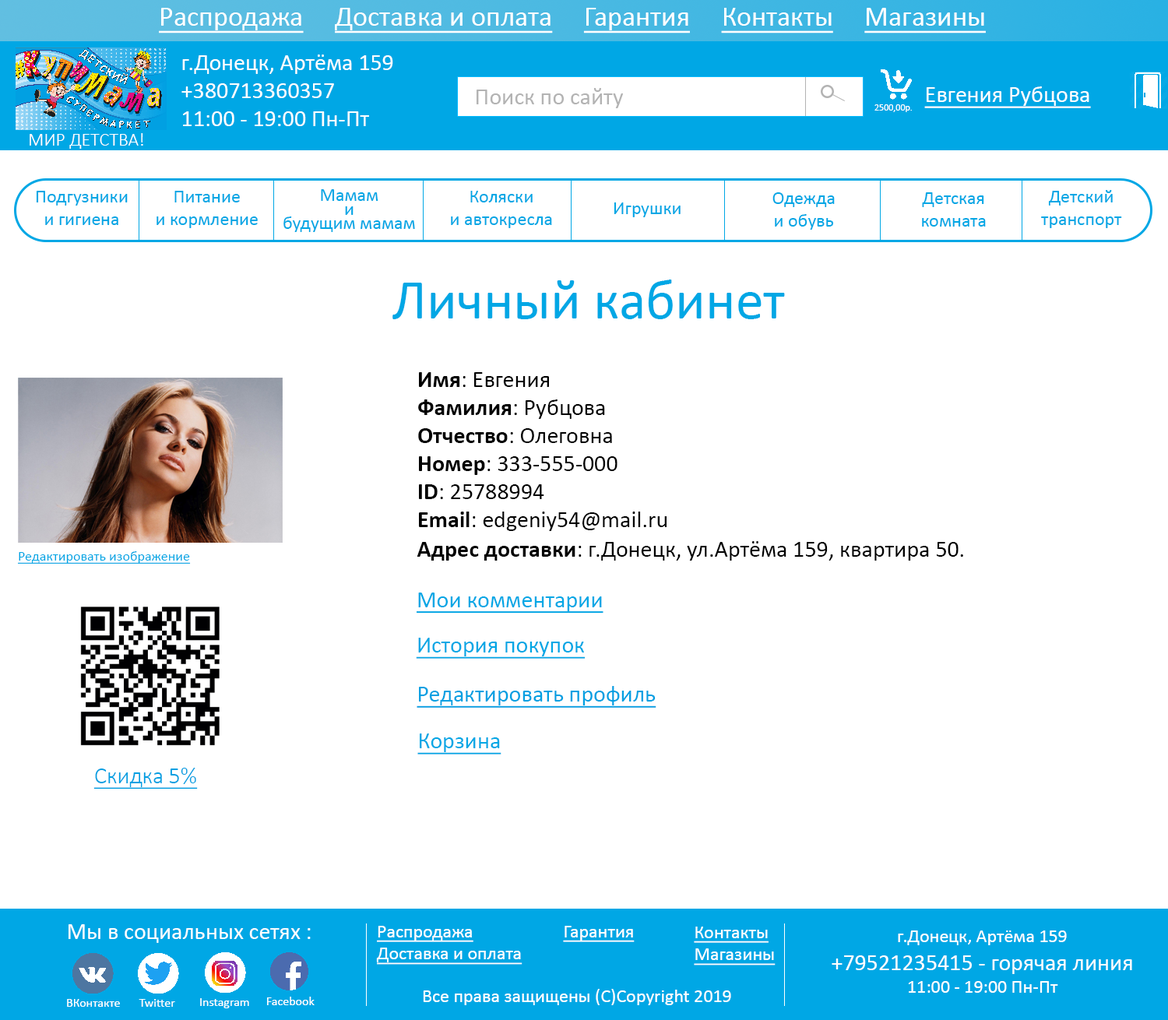
<style>
.page{position:relative;width:1168px;height:1020px;background:#ffffff}
.page>*{position:absolute;margin:0}
.t1{font:28px "Calibri";color:#ffffff;text-decoration:underline}
.t2{font:23.4px "Calibri";color:#ffffff}
.t3{font:23.4px "Calibri";color:#b3b3b3}
.t4{font:23.4px "Calibri";color:#ffffff;text-decoration:underline}
.t5{font:9.3px "Calibri";color:#ffffff}
.t6{font:18.7px "Calibri-Light";color:#ffffff}
.t7{font:18.7px "Calibri";color:#00a7e5}
.t8{font:18.7px/14px "Calibri";color:#00a7e5}
.t9{font:56.1px "Calibri";color:#00a7e5}
.t10{font:23.4px "Calibri";color:#000000}
.t11{font:23.4px "Calibri-Bold";color:#000000}
.t12{font:14px "Calibri";color:#00a7e5;text-decoration:underline}
.t13{font:23.4px "Calibri";color:#00a7e5;text-decoration:underline}
.t14{font:23.4px "Calibri";color:#01a0e2;text-decoration:underline}
.t15{font:23.4px "Calibri-Light";color:#01a0e2;text-decoration:underline}
.t16{font:18.7px "Calibri";color:#ffffff;text-decoration:underline}
.t17{font:18.7px "Calibri";color:#ffffff}
.t18{font:12.5px "Calibri";color:#ffffff}
</style>
<div class="page">
<p class="t1" style="left:159px;top:8px;width:827px;height:25px">Распродажа     Доставка и оплата     Гарантия     Контакты     Магазины</p>
<p class="t2" style="left:182px;top:55px;width:211px;height:71px">г.Донецк, Артёма 159<br>+380713360357<br>11:00 - 19:00 Пн-Пт</p>
<p class="t3" style="left:477px;top:88px;width:146px;height:20px">Поиск по сайту</p>
<p class="t4" style="left:925px;top:86px;width:166px;height:22px">Евгения Рубцова</p>
<p class="t5" style="left:875px;top:104px;width:37px;height:8px">2500,00р.</p>
<p class="t6" style="left:30px;top:133px;width:113px;height:16px">МИР ДЕТСТВА!</p>
<p class="t7" style="left:36px;top:191px;width:92px;height:34px;text-align:center">Подгузники<br>и гигиена</p>
<p class="t7" style="left:157px;top:191px;width:101px;height:37px;text-align:center">Питание <br>и кормление</p>
<p class="t8" style="left:284px;top:189px;width:131px;height:43px;text-align:center">Мамам<br>и <br>будущим мамам</p>
<p class="t7" style="left:451px;top:191px;width:101px;height:37px;text-align:center">Коляски<br>и автокресла</p>
<p class="t7" style="left:773px;top:192px;width:62px;height:38px;text-align:center">Одежда<br>и обувь</p>
<p class="t7" style="left:922px;top:192px;width:64px;height:35px;text-align:center">Детская<br>комната</p>
<p class="t7" style="left:1042px;top:190px;width:81px;height:38px;text-align:center">Детский<br>транспорт</p>
<p class="t7" style="left:614px;top:203px;width:67px;height:14px">Игрушки</p>
<p class="t9" style="left:393px;top:280px;width:392px;height:39px">Личный кабинет</p>
<p class="t10" style="left:418px;top:372px;width:249px;height:159px"><span class="t11">Имя</span>: Евгения<br><span class="t11">Фамилия</span>: Рубцова<br><span class="t11">Отчество</span>: Олеговна<br><span class="t11">Номер</span>: 333-555-000<br><span class="t11">ID</span>: 25788994<br><span class="t11">Email</span>: edgeniy54@mail.ru</p>
<p class="t10" style="left:417px;top:541px;width:547px;height:20px"><span class="t11">Адрес доставки</span>: г.Донецк, ул.Артёма 159, квартира 50.</p>
<p class="t12" style="left:18px;top:552px;width:173px;height:12px">Редактировать изображение</p>
<p class="t13" style="left:417px;top:593px;width:187px;height:21px">Мои комментарии</p>
<p class="t13" style="left:416px;top:638px;width:170px;height:21px">История покупок</p>
<p class="t14" style="left:417px;top:686px;width:240px;height:22px">Редактировать профиль</p>
<p class="t13" style="left:418px;top:734px;width:84px;height:21px">Корзина</p>
<p class="t15" style="left:93px;top:768px;width:105px;height:21px">Скидка 5%</p>
<p class="t2" style="left:69px;top:925px;width:242px;height:18px">Мы в социальных сетях :</p>
<p class="t16" style="left:376px;top:926px;width:147px;height:39px">Распродажа<br>Доставка и оплата</p>
<p class="t16" style="left:563px;top:926px;width:72px;height:17px">Гарантия</p>
<p class="t16" style="left:694px;top:927px;width:82px;height:39px">Контакты<br>Магазины</p>
<p class="t2" style="left:832px;top:931px;width:301px;height:62px;text-align:center"><span class="t17">г.Донецк, Артёма 159<br></span>+79521235415 - горячая линия<br><span class="t17">11:00 - 19:00 Пн-Пт</span></p>
<p class="t17" style="left:423px;top:989px;width:308px;height:17px">Все права защищены (С)Copyright 2019</p>
<p class="t18" style="left:67px;top:999px;width:53px;height:8px">ВКонтакте</p>
<p class="t18" style="left:139px;top:999px;width:36px;height:8px">Twitter</p>
<p class="t18" style="left:200px;top:999px;width:49px;height:10px">Instagram</p>
<p class="t18" style="left:267px;top:997px;width:48px;height:9px">Facebook</p>
</div>
